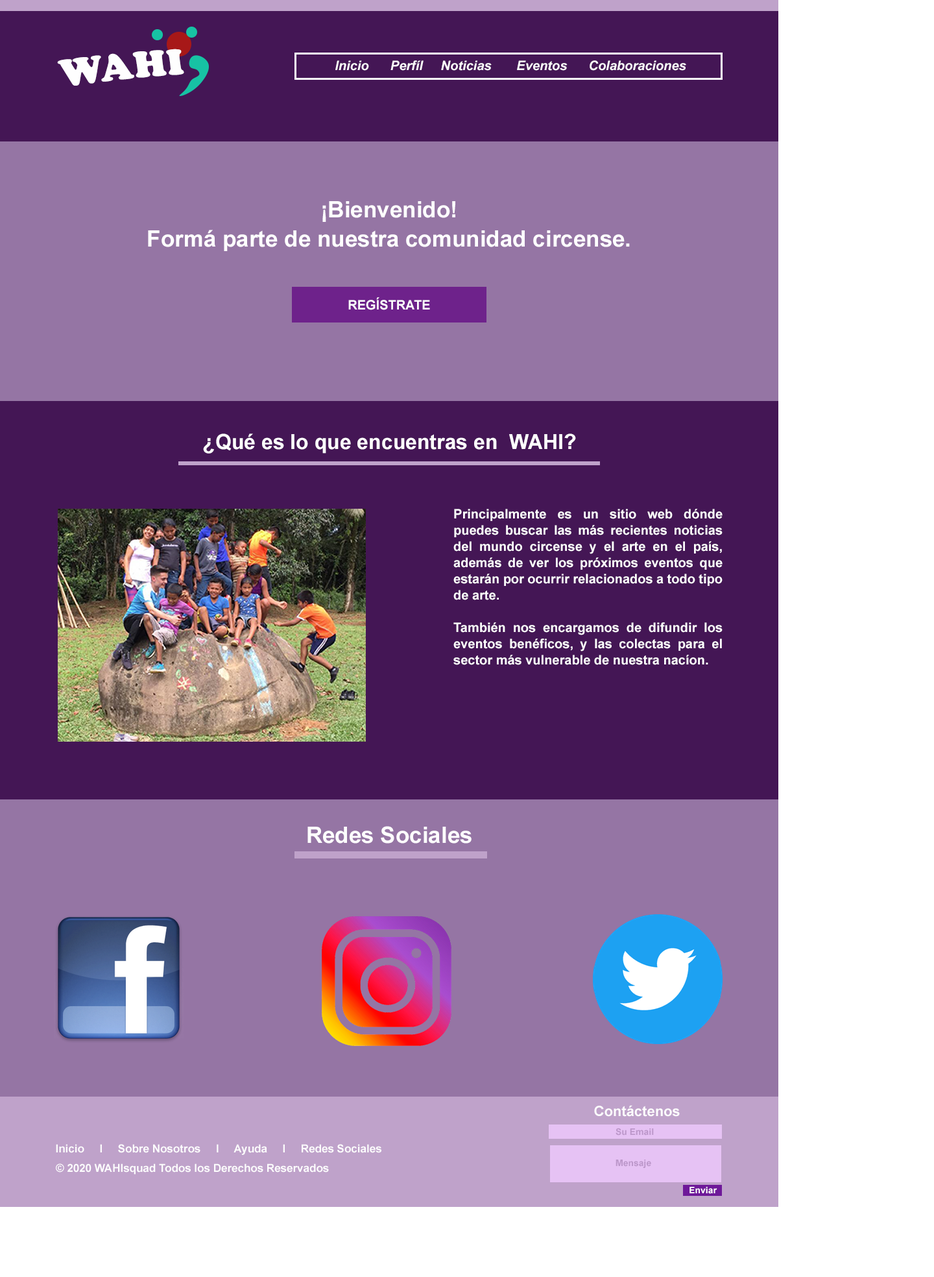
<style>
.page{position:relative;width:934px;height:1277px;background:#9575a4}
.page>*{position:absolute;margin:0}
.t1{font:32.4px "CooperBlack";color:#fefefe}
.t2{font:13px "Arial-BoldItalicMT";color:#fcfcfc}
.t3{font:22.7px/29.2px "Arial-BoldMT";color:#ffffff}
.t4{font:13px "Arial-BoldMT";color:#ffffff}
.t5{font:20.8px "Arial-BoldMT";color:#ffffff}
.t6{font:13px/16.2px "Arial-BoldMT";color:#ffffff}
.t7{font:22.7px "Arial-BoldMT";color:#fdfdfd}
.t8{font:14.3px "Arial-BoldMT";color:#fdfdfd}
.t9{font:9.1px "Arial-BoldMT";color:#bc97ca}
.t10{font:11px "Arial-BoldMT";color:#fdfdfd}
.t11{font:9.1px "Arial-BoldMT";color:#fdfdfd}
</style>
<div class="page">
<p class="t1" style="left:57px;top:49px;width:127px;height:37px">WAHI</p>
<p class="t2" style="left:335px;top:60px;width:351px;height:11px">Inicio      Perfíl     Noticias       Eventos      Colaboraciones</p>
<p class="t3" style="left:148px;top:201px;width:482px;height:50px;text-align:center">¡Bienvenido!<br>Formá parte de nuestra comunidad circense.</p>
<p class="t4" style="left:348px;top:297px;width:82px;height:13px">REGÍSTRATE</p>
<p class="t5" style="left:203px;top:433px;width:373px;height:20px">¿Qué es lo que encuentras en  WAHI?</p>
<p class="t6" style="left:453px;top:509px;width:270px;height:156px;text-align:justify">Principalmente es un sitio web dónde puedes buscar las más recientes noticias del mundo circense y el arte en el país, además de ver los próximos eventos que estarán por ocurrir relacionados a todo tipo de arte.<br><br>También nos encargamos de difundir los eventos benéficos, y las colectas para el sector más vulnerable de nuestra nacíon.</p>
<p class="t7" style="left:307px;top:826px;width:165px;height:17px">Redes Sociales</p>
<p class="t8" style="left:594px;top:1105px;width:86px;height:11px">Contáctenos</p>
<p class="t9" style="left:616px;top:1127px;width:38px;height:8px">Su Email</p>
<p class="t10" style="left:56px;top:1144px;width:325px;height:11px">Inicio     I     Sobre Nosotros     I     Ayuda     I     Redes Sociales</p>
<p class="t10" style="left:56px;top:1163px;width:273px;height:11px">© 2020 WAHIsquad Todos los Derechos Reservados</p>
<p class="t9" style="left:616px;top:1159px;width:35px;height:9px">Mensaje</p>
<p class="t11" style="left:690px;top:1186px;width:27px;height:8px">Enviar</p>
</div>
